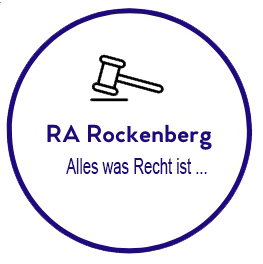
<style>
.page{position:relative;width:263px;height:264px;background:#ffffff}
.page>*{position:absolute;margin:0}
.t1{font:21.8px "ArialMT";color:#1e0a79;scale:0.68 1}
</style>
<div class="page">
<p class="t1" style="left:66px;top:158px;width:141px;height:16px">Alles was Recht ist ...</p>
</div>
